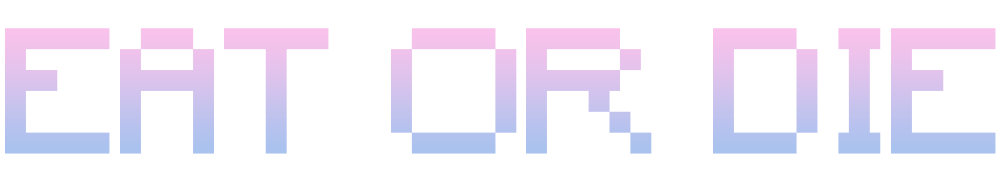
<style>
.page{position:relative;width:1000px;height:183px;background:#ffffff}
.page>*{position:absolute;margin:0}
.t1{font:166.7px "Minecraft"}
</style>
<div class="page">
<p class="t1" style="left:5px;top:28px;width:991px;height:126px">EAT OR DIE</p>
</div>
